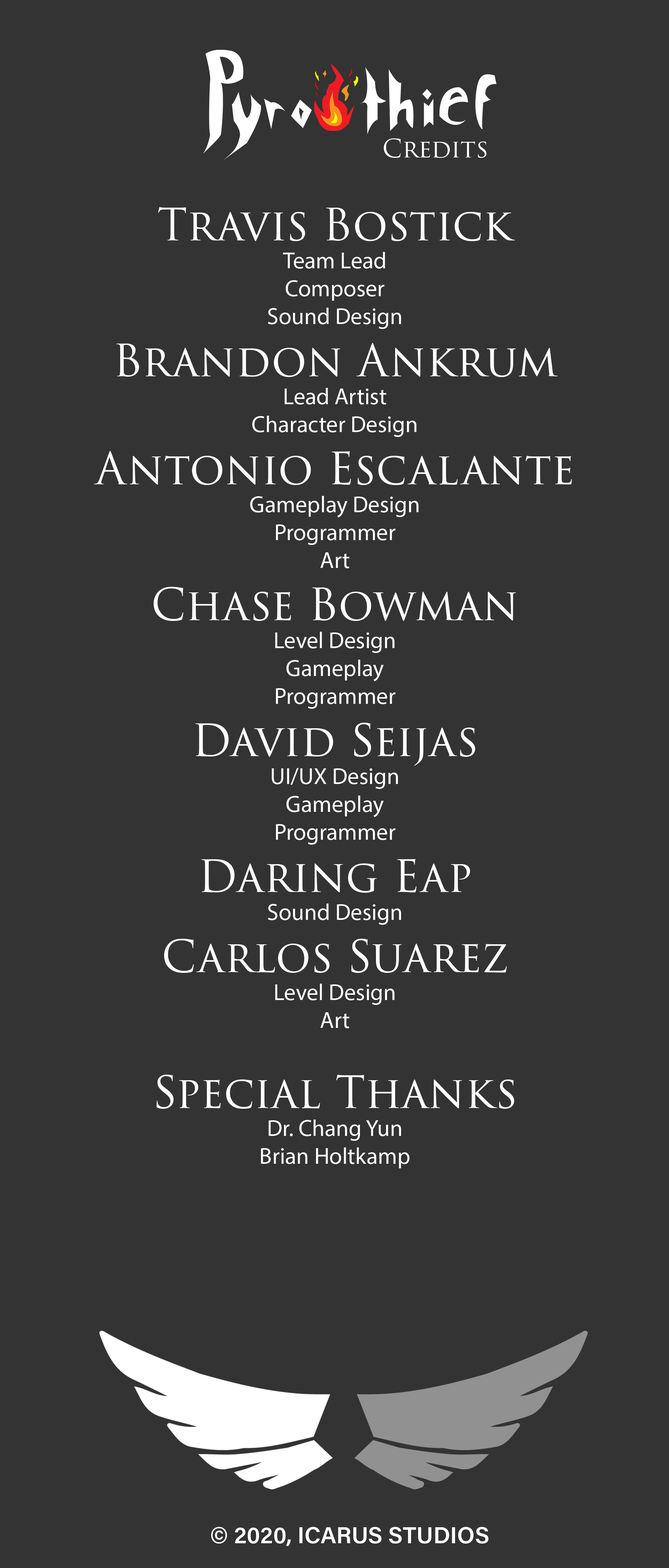
<style>
.page{position:relative;width:669px;height:1568px;background:#333333}
.page>*{position:absolute;margin:0}
.t1{font:24.9px "TrajanPro3-Regular";color:#ffffff}
.t2{font:23.2px "MyriadPro-Regular";color:#ffffff}
.t3{font:43.6px "MyriadPro-Regular";color:#ffffff}
.t4{font:43.6px "TrajanPro3-Regular";color:#ffffff}
.t5{font:23.2px "AcuminPro-Semibold";color:#ffffff}
</style>
<div class="page">
<p class="t1" style="left:384px;top:138px;width:102px;height:20px">Credits</p>
<p class="t2" style="left:94px;top:207px;width:478px;height:961px;text-align:center"><span class="t3"><br><br></span><span class="t4">Travis Bostick<br></span>Team Lead<br>Composer<br>Sound Design<br><span class="t4">Brandon Ankrum<br></span>Lead Artist<br>Character Design<br><span class="t4">Antonio Escalante<br></span>Gameplay Design<br>Programmer<br>Art<br><span class="t4">Chase Bowman<br></span>Level Design<br>Gameplay<br>Programmer<br><span class="t4">David Seijas<br></span>UI/UX Design<br>Gameplay<br>Programmer<br><span class="t4">Daring Eap<br></span>Sound Design<br><span class="t4">Carlos Suarez<br></span>Level Design<br>Art<br><br><span class="t4">Special Thanks<br></span>Dr. Chang Yun<br>Brian Holtkamp</p>
<p class="t5" style="left:211px;top:1527px;width:278px;height:19px">© 2020, ICARUS STUDIOS</p>
</div>
